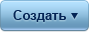
<style>
.page{position:relative;width:89px;height:32px}
.page>*{position:absolute;margin:0}
.t1{font:13px "Arial-BoldMT";color:#032455}
</style>
<div class="page">
<p class="t1" style="left:13px;top:10px;width:53px;height:12px">Создать</p>
</div>
